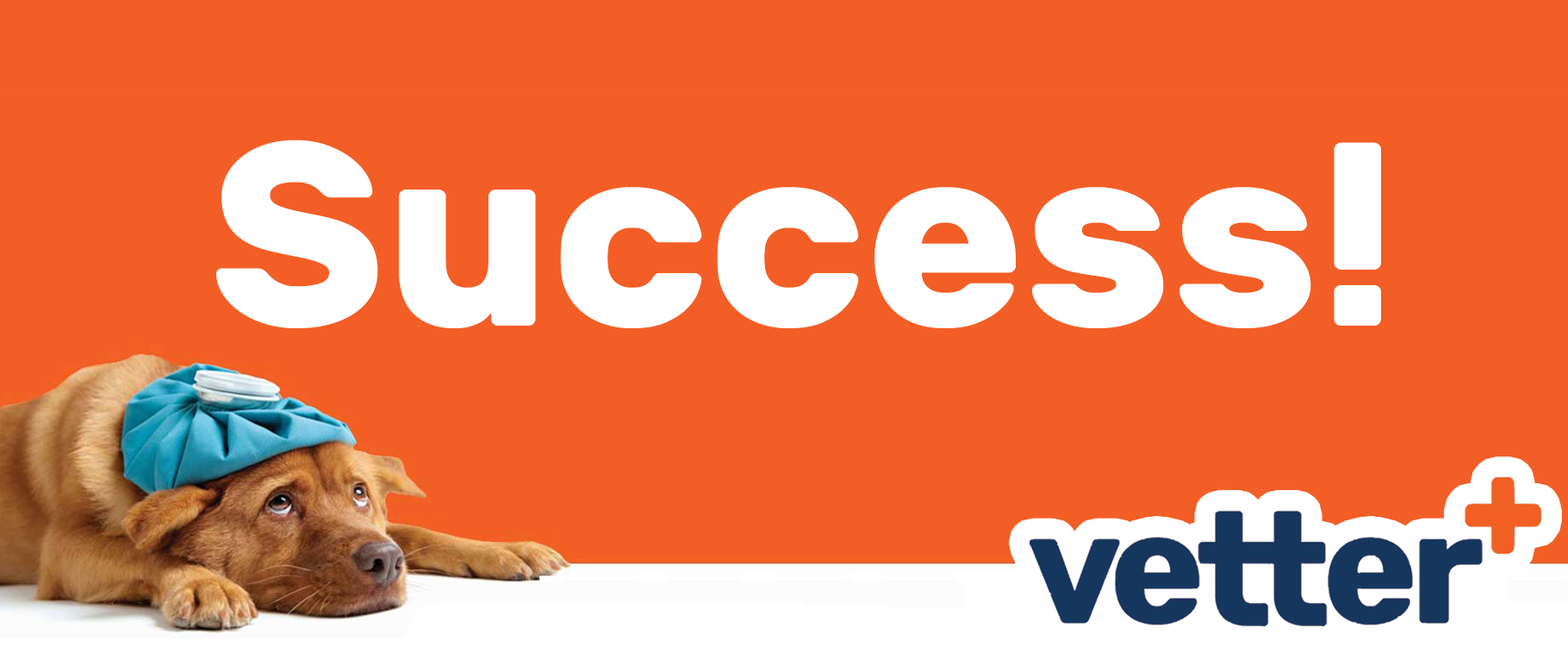
<style>
.page{position:relative;width:1568px;height:653px;background:#f35e26}
.page>*{position:absolute;margin:0}
.t1{font:261.3px "Rubik-Bold";color:#ffffff}
</style>
<div class="page">
<p class="t1" style="left:216px;top:140px;width:1165px;height:188px">Success!</p>
</div>
